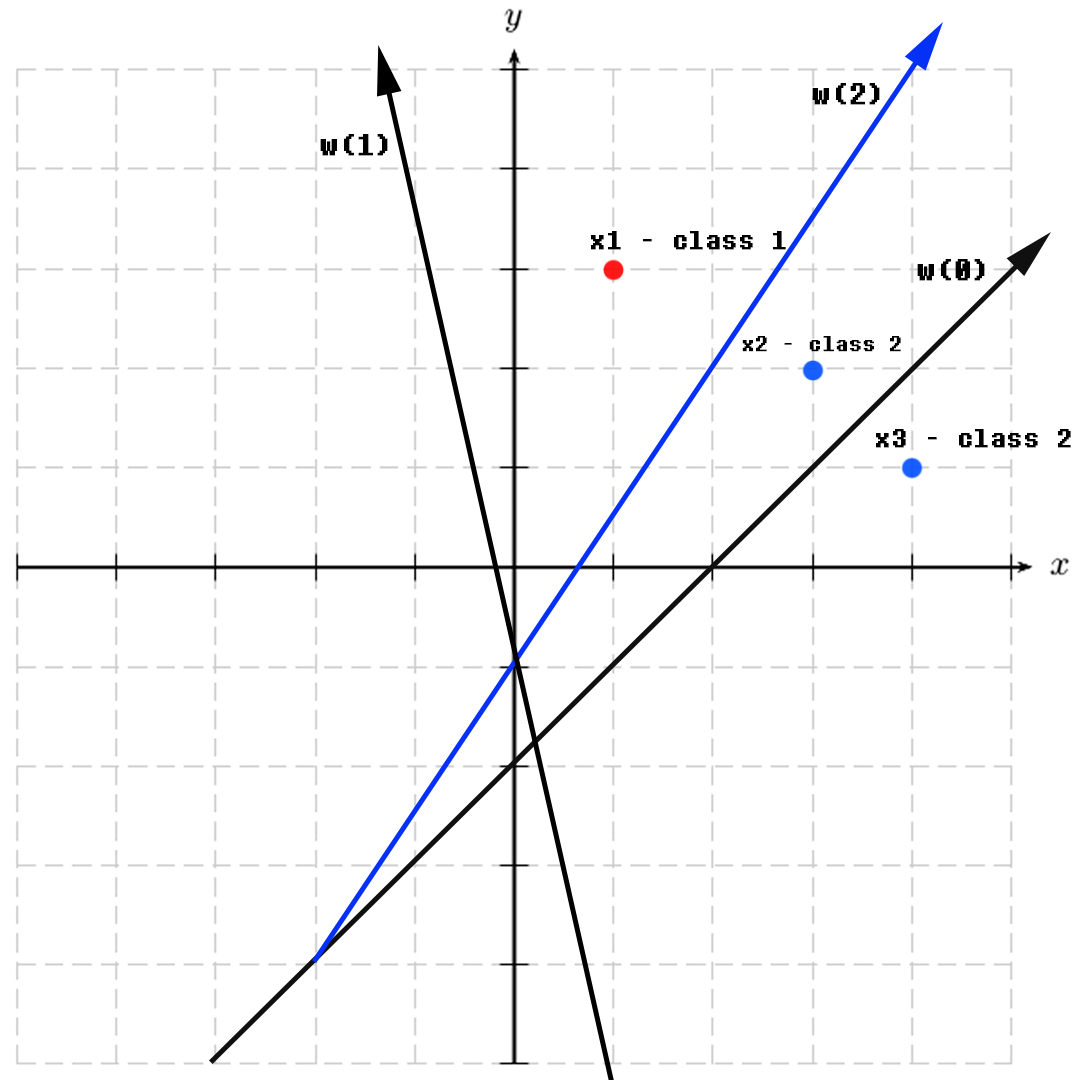
<style>
.page{position:relative;width:1080px;height:1080px;background:#ffffff}
.page>*{position:absolute;margin:0}
.t1{font:30.4px "DeterminationMono";color:#000000;font-weight:bold}
.t2{font:26.4px "DeterminationMono";color:#000000;font-weight:bold}
.t3{font:21.4px "DeterminationMono";color:#000000;font-weight:bold}
</style>
<div class="page">
<p class="t1" style="left:812px;top:83px;width:68px;height:22px">w(2)</p>
<p class="t1" style="left:320px;top:134px;width:68px;height:22px">w(1)</p>
<p class="t2" style="left:591px;top:231px;width:195px;height:19px">x1 - class 1</p>
<p class="t1" style="left:917px;top:259px;width:68px;height:22px">w(0)</p>
<p class="t3" style="left:742px;top:336px;width:159px;height:16px">x2 - class 2</p>
<p class="t2" style="left:876px;top:429px;width:195px;height:19px">x3 - class 2</p>
</div>
